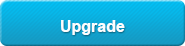
<style>
.page{position:relative;width:185px;height:46px}
.page>*{position:absolute;margin:0}
.t1{font:16px "Arial-BoldMT";color:#fdfdfd}
</style>
<div class="page">
<p class="t1" style="left:61px;top:20px;width:64px;height:15px">Upgrade</p>
</div>
